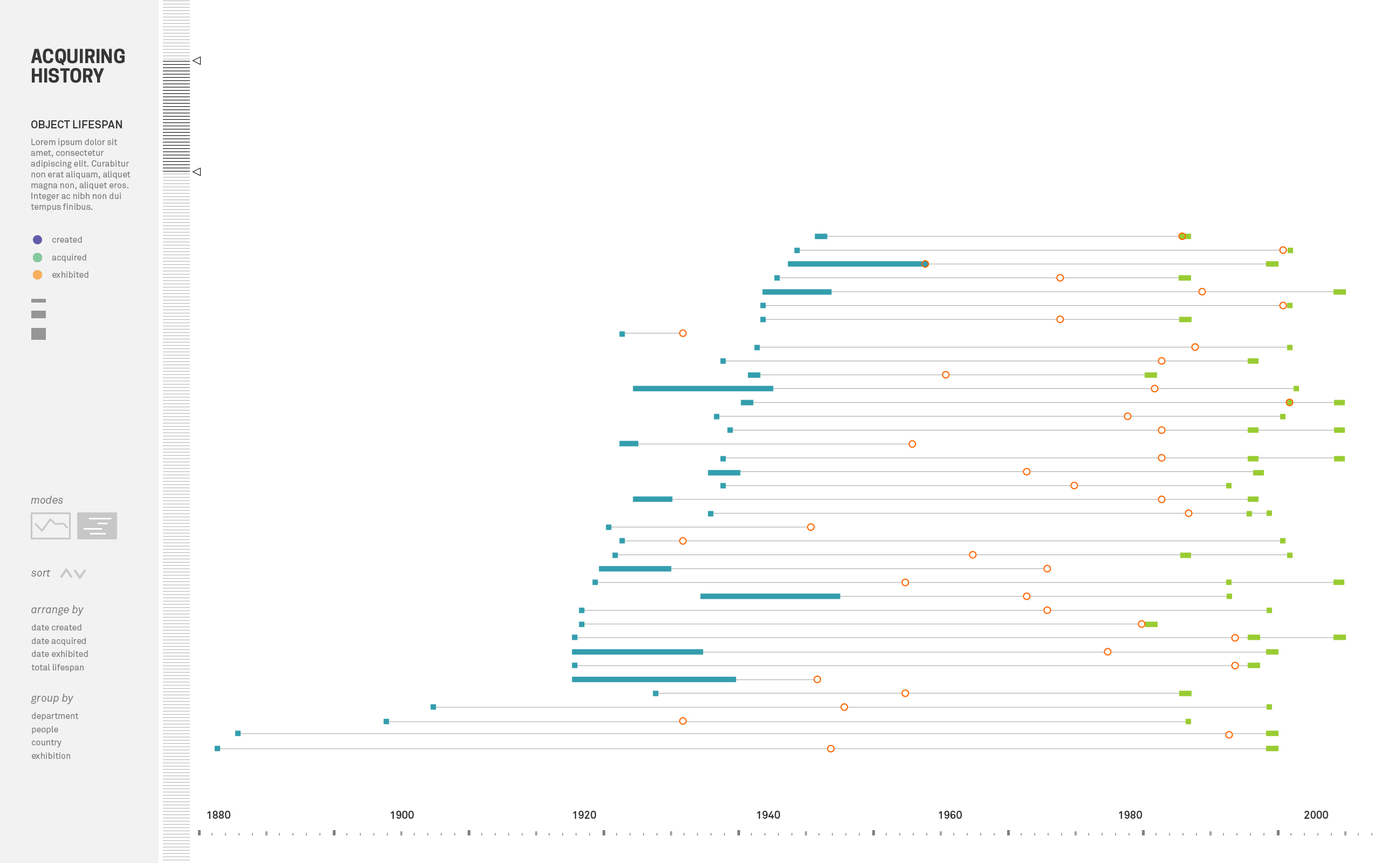
<style>
.page{position:relative;width:1381px;height:863px;background:#ffffff}
.page>*{position:absolute;margin:0}
.t1{font:18.3px/19.4px "CooperHewitt-Bold";color:#363636}
.t2{font:10.8px "Akkurat-Bold";color:#363636}
.t3{font:8.6px/10.8px "Akkurat";color:#7d7d7d}
.t4{font:8.6px "Akkurat";color:#7d7d7d}
.t5{font:10.8px "Akkurat-Italic";color:#7d7d7d}
</style>
<div class="page">
<p class="t1" style="left:31px;top:49px;width:94px;height:34px">ACQUIRING HISTORY</p>
<p class="t2" style="left:31px;top:120px;width:91px;height:8px">OBJECT LIFESPAN</p>
<p class="t3" style="left:31px;top:139px;width:100px;height:73px">Lorem ipsum dolor sit amet, consectetur adipiscing elit. Curabitur non erat aliquam, aliquet magna non, aliquet eros. Integer ac nibh non dui tempus finibus.</p>
<p class="t4" style="left:52px;top:236px;width:30px;height:7px">created</p>
<p class="t4" style="left:52px;top:254px;width:34px;height:8px">acquired</p>
<p class="t4" style="left:52px;top:271px;width:36px;height:7px">exhibited</p>
<p class="t5" style="left:31px;top:496px;width:32px;height:8px">modes</p>
<p class="t5" style="left:31px;top:570px;width:20px;height:7px">sort</p>
<p class="t5" style="left:31px;top:605px;width:53px;height:11px">arrange by</p>
<p class="t4" style="left:32px;top:624px;width:49px;height:7px">date created</p>
<p class="t4" style="left:32px;top:638px;width:54px;height:8px">date acquired</p>
<p class="t4" style="left:32px;top:651px;width:56px;height:6px">date exhibited</p>
<p class="t4" style="left:31px;top:664px;width:53px;height:8px">total lifespan</p>
<p class="t5" style="left:31px;top:694px;width:43px;height:11px">group by</p>
<p class="t4" style="left:32px;top:713px;width:47px;height:8px">department</p>
<p class="t4" style="left:32px;top:726px;width:26px;height:8px">people</p>
<p class="t4" style="left:32px;top:740px;width:30px;height:8px">country</p>
<p class="t4" style="left:32px;top:753px;width:38px;height:6px">exhibition</p>
<p class="t2" style="left:207px;top:811px;width:23px;height:8px">1880</p>
<p class="t2" style="left:391px;top:811px;width:23px;height:8px">1900</p>
<p class="t2" style="left:573px;top:811px;width:23px;height:8px">1920</p>
<p class="t2" style="left:757px;top:811px;width:23px;height:8px">1940</p>
<p class="t2" style="left:939px;top:811px;width:23px;height:8px">1960</p>
<p class="t2" style="left:1119px;top:811px;width:23px;height:8px">1980</p>
<p class="t2" style="left:1305px;top:811px;width:23px;height:8px">2000</p>
</div>
